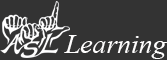
<style>
.page{position:relative;width:167px;height:60px;background:#333333}
.page>*{position:absolute;margin:0}
.t1{font:27.2px "TimesNewRomanPS-ItalicMT";color:#fffefe}
</style>
<div class="page">
<p class="t1" style="left:64px;top:35px;width:104px;height:24px">Learning</p>
</div>
